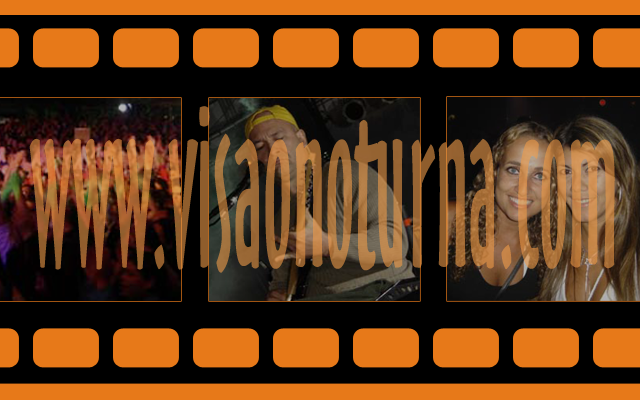
<style>
.page{position:relative;width:640px;height:400px;background:#000000}
.page>*{position:absolute;margin:0}
.t1{font:223px "OzHandicraftBT-Roman";scale:0.46 1}
</style>
<div class="page">
<p class="t1" style="left:29px;top:106px;width:586px;height:167px">www.visaonoturna.com</p>
</div>
